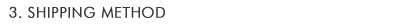
<style>
.page{position:relative;width:400px;height:24px;background:#ffffff}
.page>*{position:absolute;margin:0}
.t1{font:14.7px "FuturaBT-Light";letter-spacing:0.025em;color:#363636;text-transform:uppercase;font-weight:bold}
</style>
<div class="page">
<p class="t1" style="left:9px;top:6px;width:156px;height:12px">3. shipping method</p>
</div>
